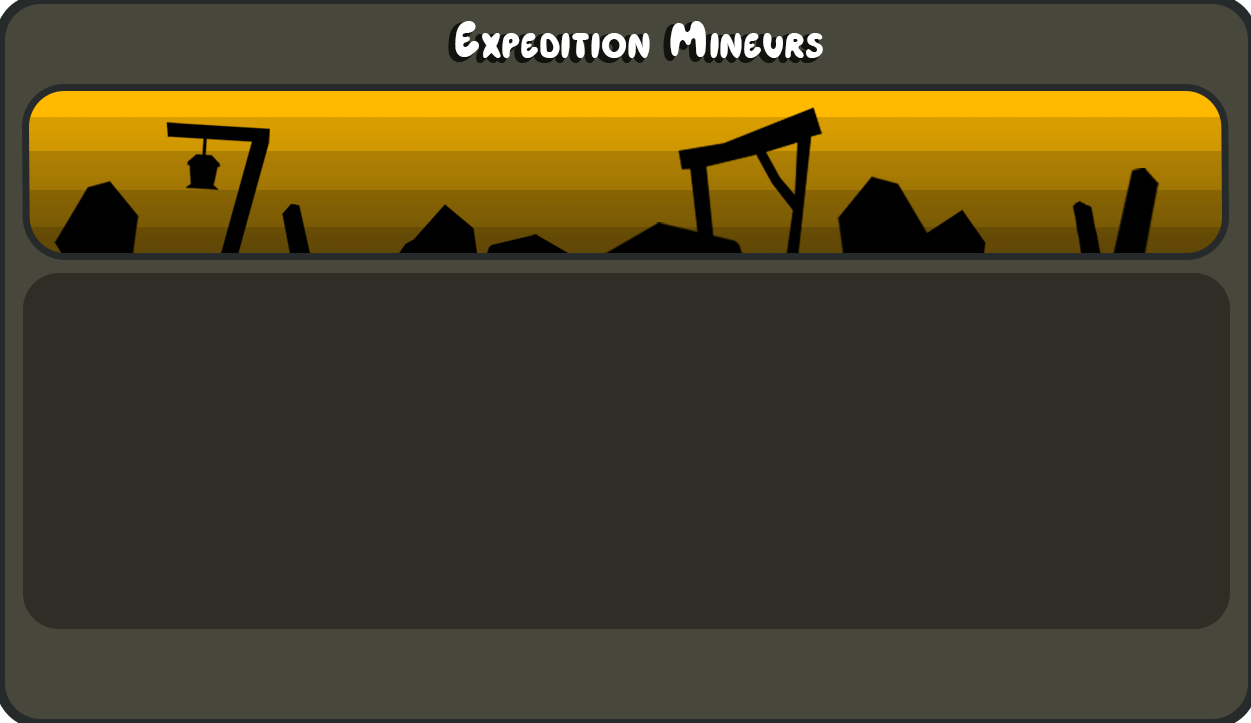
<style>
.page{position:relative;width:1251px;height:723px;background:#2f2e26}
.page>*{position:absolute;margin:0}
.t1{font:52px "Heyam";letter-spacing:0.05em;color:#ffffff;font-variant:small-caps}
</style>
<div class="page">
<p class="t1" style="left:455px;top:21px;width:368px;height:37px">Expedition Mineurs</p>
</div>
